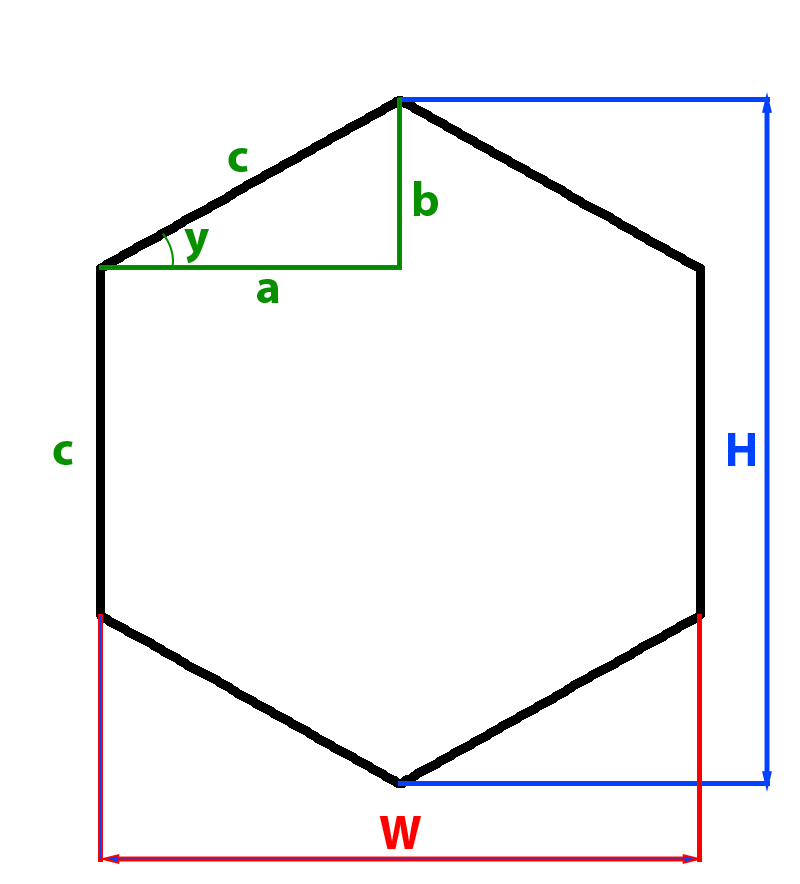
<style>
.page{position:relative;width:800px;height:884px;background:#ffffff}
.page>*{position:absolute;margin:0}
.t1{font:48px "MyriadPro-Bold";color:#079000}
.t2{font:48px "MyriadPro-Bold";color:#0042ff}
.t3{font:48px "MyriadPro-Bold";color:#ff0000}
</style>
<div class="page">
<p class="t1" style="left:228px;top:148px;width:20px;height:24px">c</p>
<p class="t1" style="left:413px;top:181px;width:25px;height:35px">b</p>
<p class="t1" style="left:184px;top:229px;width:25px;height:34px">y</p>
<p class="t1" style="left:257px;top:279px;width:22px;height:24px">a</p>
<p class="t2" style="left:728px;top:433px;width:27px;height:33px">H</p>
<p class="t1" style="left:53px;top:441px;width:20px;height:24px">c</p>
<p class="t3" style="left:379px;top:816px;width:42px;height:33px">W</p>
</div>
